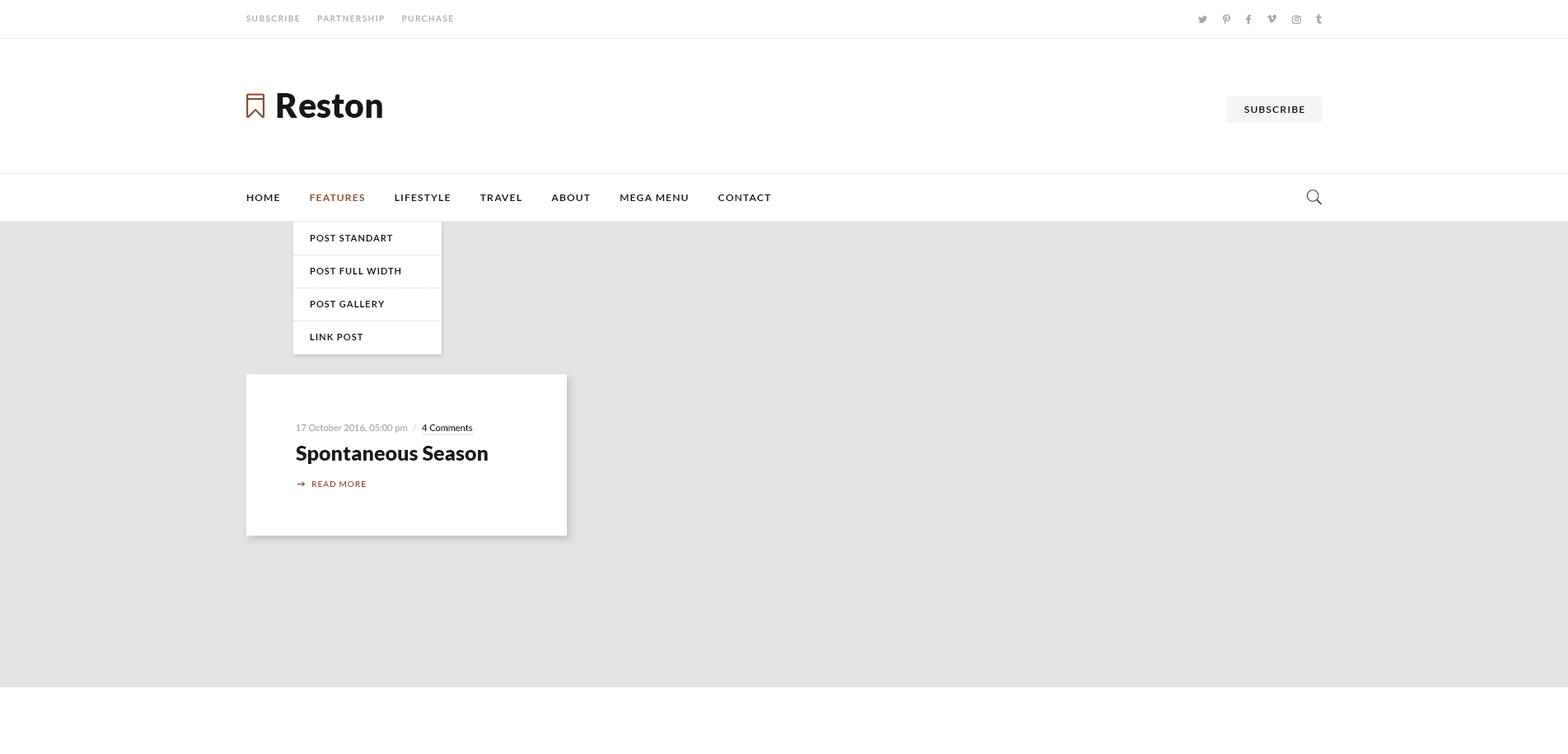
<style>
.page{position:relative;width:1568px;height:754px;background:#e3e3e3}
.page>*{position:absolute;margin:0}
.t1{font:8.2px "Lato-Medium";letter-spacing:0.15em;color:#a8a8a8;text-transform:uppercase}
.t2{font:33.8px "Lato-Black";color:#161616}
.t3{font:9.9px "Lato-Bold";letter-spacing:0.1em;color:#171717;text-transform:uppercase}
.t4{font:9.9px "Lato-Bold";letter-spacing:0.1em;color:#8a512f;text-transform:uppercase}
.t5{font:9.1px/33px "Lato-Bold";letter-spacing:0.1em;color:#171717;text-transform:uppercase}
.t6{font:8.2px "Lato-Black";letter-spacing:0.1em;color:#cdcdcd}
.t7{font:9.1px "Lato-Medium";color:#a8a8a8}
.t8{font:9.1px "Lato-Medium";color:#d7d7d7}
.t9{font:9.1px "Lato-Medium";color:#1a1a1a}
.t10{font:20.6px "Lato-Black";color:#1a1a1a}
.t11{font:8.2px "Lato-Regular";letter-spacing:0.1em;color:#8a512f;text-transform:uppercase}
</style>
<div class="page">
<p class="t1" style="left:246px;top:15px;width:207px;height:7px">Subscribe     partnership     Purchase</p>
<p class="t2" style="left:277px;top:93px;width:105px;height:25px">Reston</p>
<p class="t3" style="left:1244px;top:106px;width:60px;height:7px">Subscribe</p>
<p class="t3" style="left:246px;top:194px;width:525px;height:7px">Home          <span class="t4">Features</span>          Lifestyle          Travel          About          Mega Menu          Contact</p>
<p class="t5" style="left:310px;top:235px;width:91px;height:105px">Post Standart            Post Full Width       Post Gallery<br>Link Post</p>
<p class="t6" style="left:293px;top:255px;width:146px;height:0px">.....................................................</p>
<p class="t6" style="left:293px;top:288px;width:146px;height:0px">.....................................................</p>
<p class="t6" style="left:293px;top:321px;width:146px;height:0px">.....................................................</p>
<p class="t7" style="left:296px;top:424px;width:112px;height:9px">17 October 2016, 05:00 pm</p>
<p class="t8" style="left:412px;top:424px;width:5px;height:8px">/</p>
<p class="t9" style="left:422px;top:424px;width:51px;height:8px">4 Comments</p>
<p class="t6" style="left:422px;top:434px;width:52px;height:1px">...................</p>
<p class="t10" style="left:296px;top:446px;width:192px;height:18px">Spontaneous Season</p>
<p class="t11" style="left:311px;top:481px;width:55px;height:6px">Read More</p>
</div>
